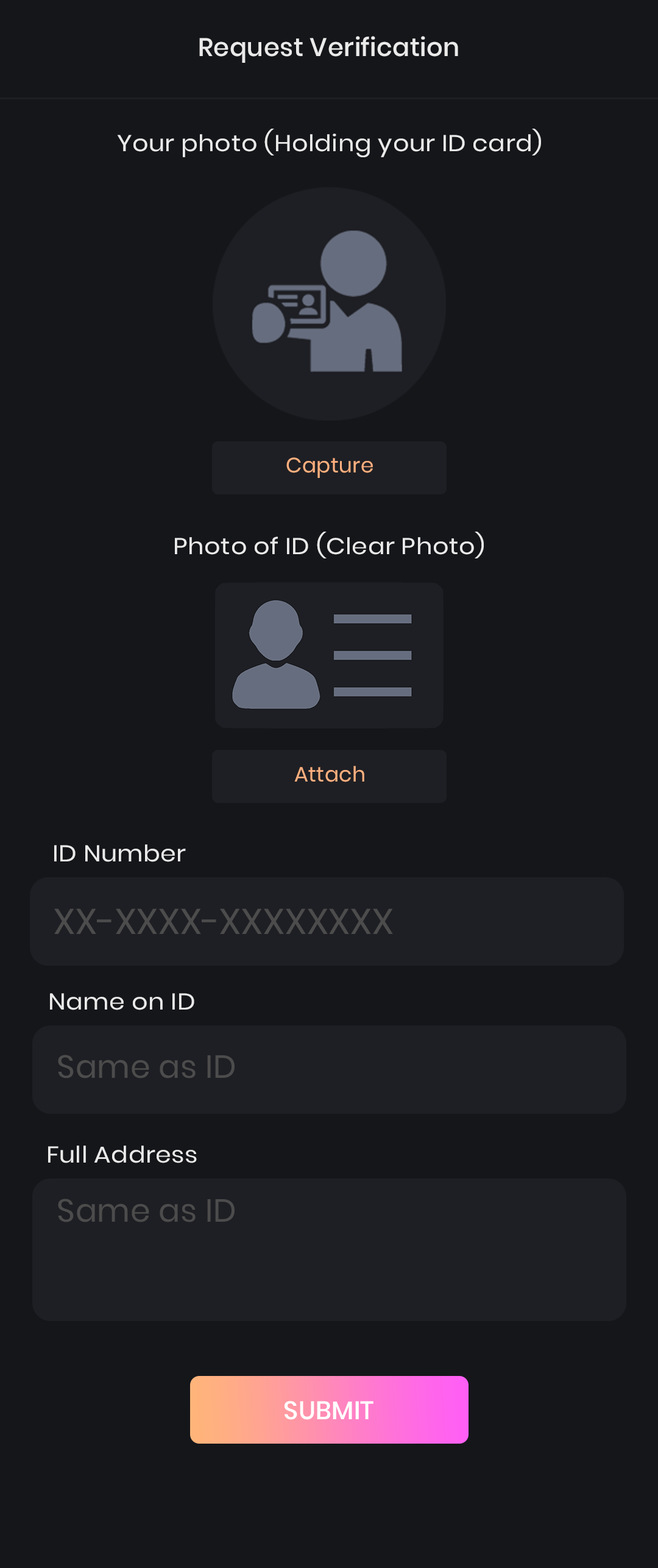
<style>
.page{position:relative;width:658px;height:1568px;background:#15161a}
.page>*{position:absolute;margin:0}
.t1{font:25.4px "Poppins-Medium";letter-spacing:0.01em;color:#eaeaea}
.t2{font:22.8px "Poppins-Regular";letter-spacing:0.01em;color:#eaeaea;scale:1.1 1}
.t3{font:20.9px "Poppins-Regular";letter-spacing:0.01em;color:#ffb07f}
.t4{font:35.8px "Poppins-Regular";letter-spacing:0.01em;color:#4c4c4c}
.t5{font:31.9px "Poppins-Regular";letter-spacing:0.01em;color:#4c4c4c}
.t6{font:25.4px "Poppins-Medium";letter-spacing:0.01em;color:#ffffff}
</style>
<div class="page">
<p class="t1" style="left:199px;top:36px;width:259px;height:27px">Request Verification</p>
<p class="t2" style="left:117px;top:129px;width:424px;height:28px">Your photo (Holding your ID card)</p>
<p class="t3" style="left:287px;top:457px;width:86px;height:21px">Capture</p>
<p class="t2" style="left:175px;top:532px;width:309px;height:26px">Photo of ID (Clear Photo)</p>
<p class="t3" style="left:294px;top:766px;width:71px;height:16px">Attach</p>
<p class="t2" style="left:54px;top:844px;width:132px;height:18px">ID Number</p>
<p class="t4" style="left:54px;top:908px;width:339px;height:26px">XX-XXXX-XXXXXXXX</p>
<p class="t2" style="left:50px;top:993px;width:144px;height:17px">Name on ID</p>
<p class="t5" style="left:58px;top:1055px;width:177px;height:23px">Same as ID</p>
<p class="t2" style="left:48px;top:1146px;width:149px;height:17px">Full Address</p>
<p class="t5" style="left:58px;top:1199px;width:177px;height:23px">Same as ID</p>
<p class="t6" style="left:285px;top:1401px;width:89px;height:19px">SUBMIT</p>
</div>
